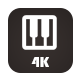
<style>
.page{position:relative;width:80px;height:80px;background:#ffffff}
.page>*{position:absolute;margin:0}
.t1{font:15px "Bauhaus93";color:#ffffff}
</style>
<div class="page">
<p class="t1" style="left:31px;top:57px;width:18px;height:10px">4K</p>
</div>
